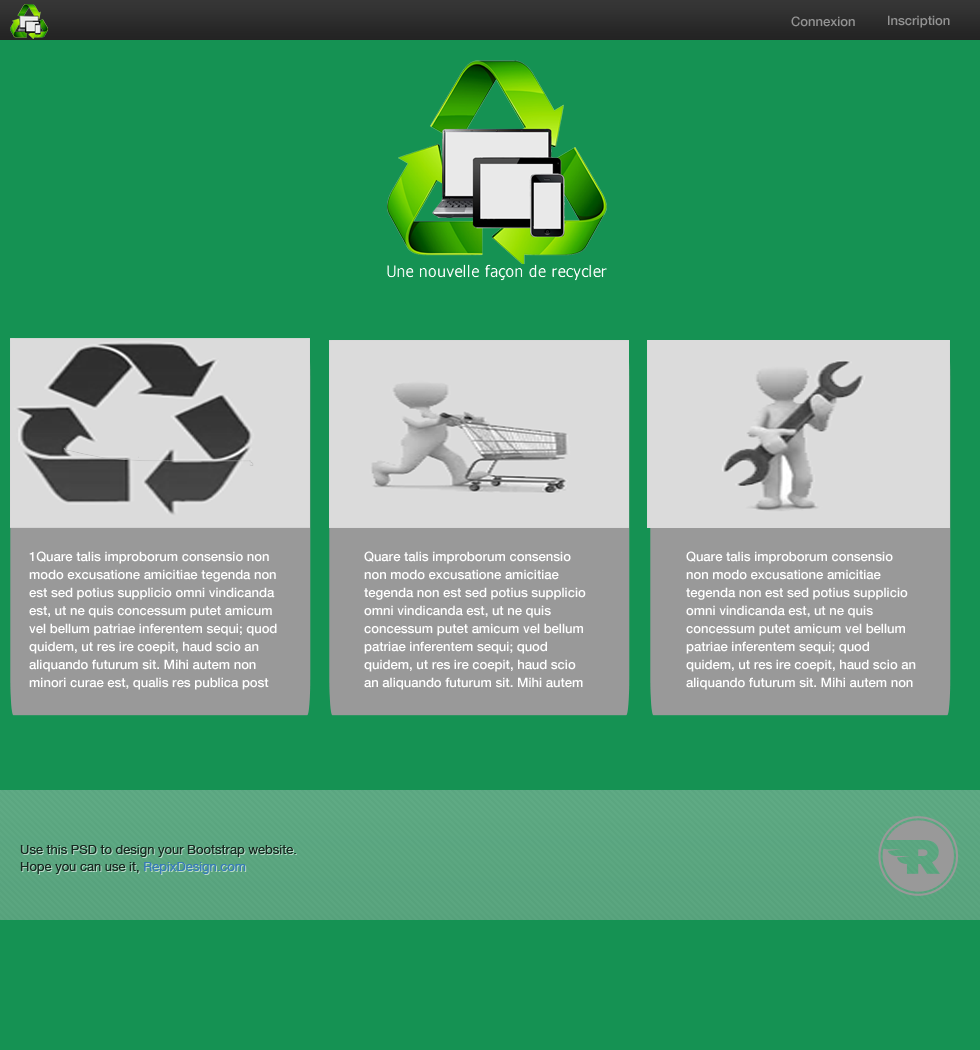
<style>
.page{position:relative;width:980px;height:1050px;background:#159253}
.page>*{position:absolute;margin:0}
.t1{font:13px "HelveticaNeue-Medium";color:#939393}
.t2{font:13px/18px "HelveticaNeue-Medium";color:#ffffff}
.t3{font:13px/9px "HelveticaNeue";color:#172a20}
</style>
<div class="page">
<p class="t1" style="left:791px;top:16px;width:64px;height:11px">Connexion</p>
<p class="t1" style="left:888px;top:15px;width:62px;height:13px">Inscription</p>
<p class="t2" style="left:29px;top:551px;width:248px;height:139px">1Quare talis improborum consensio non modo excusatione amicitiae tegenda non est sed potius supplicio omni vindicanda est, ut ne quis concessum putet amicum vel bellum patriae inferentem sequi; quod quidem, ut res ire coepit, haud scio an aliquando futurum sit. Mihi autem non minori curae est, qualis res publica post mortem meam futura, quam qualis hodie sit.</p>
<p class="t2" style="left:364px;top:551px;width:222px;height:139px">Quare talis improborum consensio non modo excusatione amicitiae tegenda non est sed potius supplicio omni vindicanda est, ut ne quis concessum putet amicum vel bellum patriae inferentem sequi; quod quidem, ut res ire coepit, haud scio an aliquando futurum sit. Mihi autem non minori curae est, qualis res publica post mortem meam futura, quam qualis hodie sit.</p>
<p class="t2" style="left:686px;top:551px;width:230px;height:139px">Quare talis improborum consensio non modo excusatione amicitiae tegenda non est sed potius supplicio omni vindicanda est, ut ne quis concessum putet amicum vel bellum patriae inferentem sequi; quod quidem, ut res ire coepit, haud scio an aliquando futurum sit. Mihi autem non minori curae est, qualis res publica post mortem meam futura, quam qualis hodie sit.</p>
<p class="t3" style="left:20px;top:845px;width:276px;height:29px">Use this PSD to design your Bootstrap website.<br>Hope you can use it, RepixDesign.com</p>
</div>
